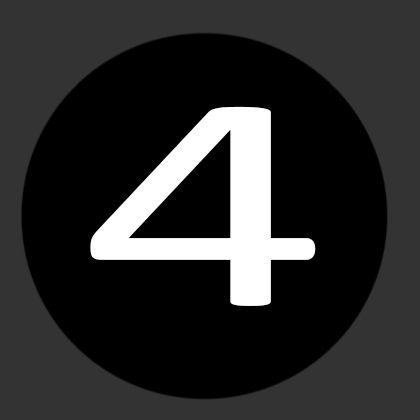
<style>
.page{position:relative;width:420px;height:420px;background:#000000}
.page>*{position:absolute;margin:0}
.t1{font:311.7px "Calibri";color:#ffffff;scale:1.59 1}
</style>
<div class="page">
<p class="t1" style="left:90px;top:106px;width:226px;height:200px">4</p>
</div>
